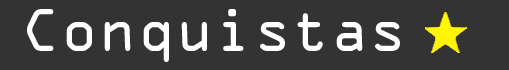
<style>
.page{position:relative;width:509px;height:70px;background:#333333}
.page>*{position:absolute;margin:0}
.t1{font:53.6px "OCRAStd";color:#ffffff}
</style>
<div class="page">
<p class="t1" style="left:27px;top:9px;width:373px;height:53px">Conquistas</p>
</div>
